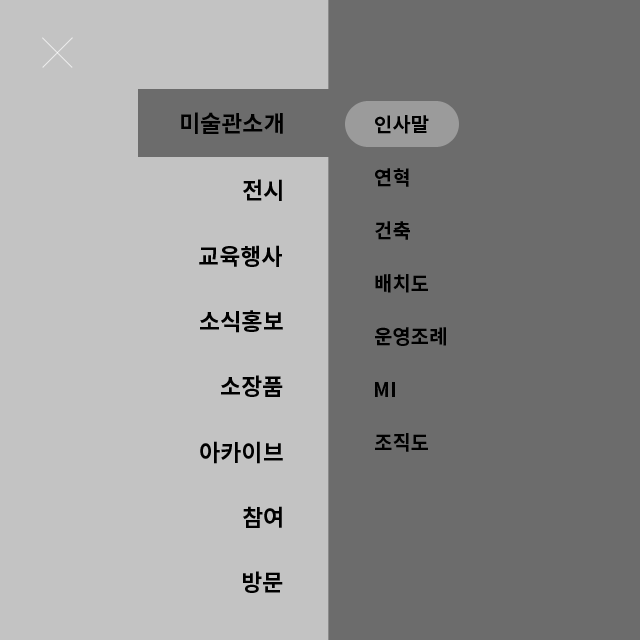
<style>
.page{position:relative;width:640px;height:640px;background:#6c6c6c}
.page>*{position:absolute;margin:0}
.t1{font:23px "NotoSansCJKkr-Bold";color:#000000}
.t2{font:20px "NotoSansCJKkr-Bold";color:#000000}
</style>
<div class="page">
<p class="t1" style="left:181px;top:112px;width:102px;height:22px">미술관소개</p>
<p class="t2" style="left:375px;top:115px;width:54px;height:19px">인사말</p>
<p class="t2" style="left:375px;top:168px;width:34px;height:19px">연혁</p>
<p class="t1" style="left:243px;top:179px;width:39px;height:22px">전시</p>
<p class="t2" style="left:375px;top:221px;width:35px;height:19px">건축</p>
<p class="t1" style="left:199px;top:245px;width:83px;height:22px">교육행사</p>
<p class="t2" style="left:375px;top:274px;width:53px;height:19px">배치도</p>
<p class="t1" style="left:200px;top:310px;width:83px;height:23px">소식홍보</p>
<p class="t2" style="left:375px;top:327px;width:71px;height:19px">운영조례</p>
<p class="t1" style="left:221px;top:375px;width:62px;height:22px">소장품</p>
<p class="t2" style="left:375px;top:382px;width:20px;height:15px">MI</p>
<p class="t2" style="left:375px;top:433px;width:53px;height:19px">조직도</p>
<p class="t1" style="left:200px;top:441px;width:83px;height:23px">아카이브</p>
<p class="t1" style="left:243px;top:506px;width:39px;height:22px">참여</p>
<p class="t1" style="left:243px;top:571px;width:40px;height:22px">방문</p>
</div>
